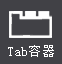
<style>
.page{position:relative;width:62px;height:64px;background:#414146}
.page>*{position:absolute;margin:0}
.t1{font:13.3px "NSimSun";color:#ffffff}
</style>
<div class="page">
<p class="t1" style="left:8px;top:45px;width:46px;height:12px">Tab容器</p>
</div>
